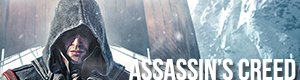
<style>
.page{position:relative;width:300px;height:80px}
.page>*{position:absolute;margin:0}
.t1{font:30px "BebasNeue";color:#ffffff}
</style>
<div class="page">
<p class="t1" style="left:129px;top:58px;width:167px;height:23px">assassin’s creed</p>
</div>
